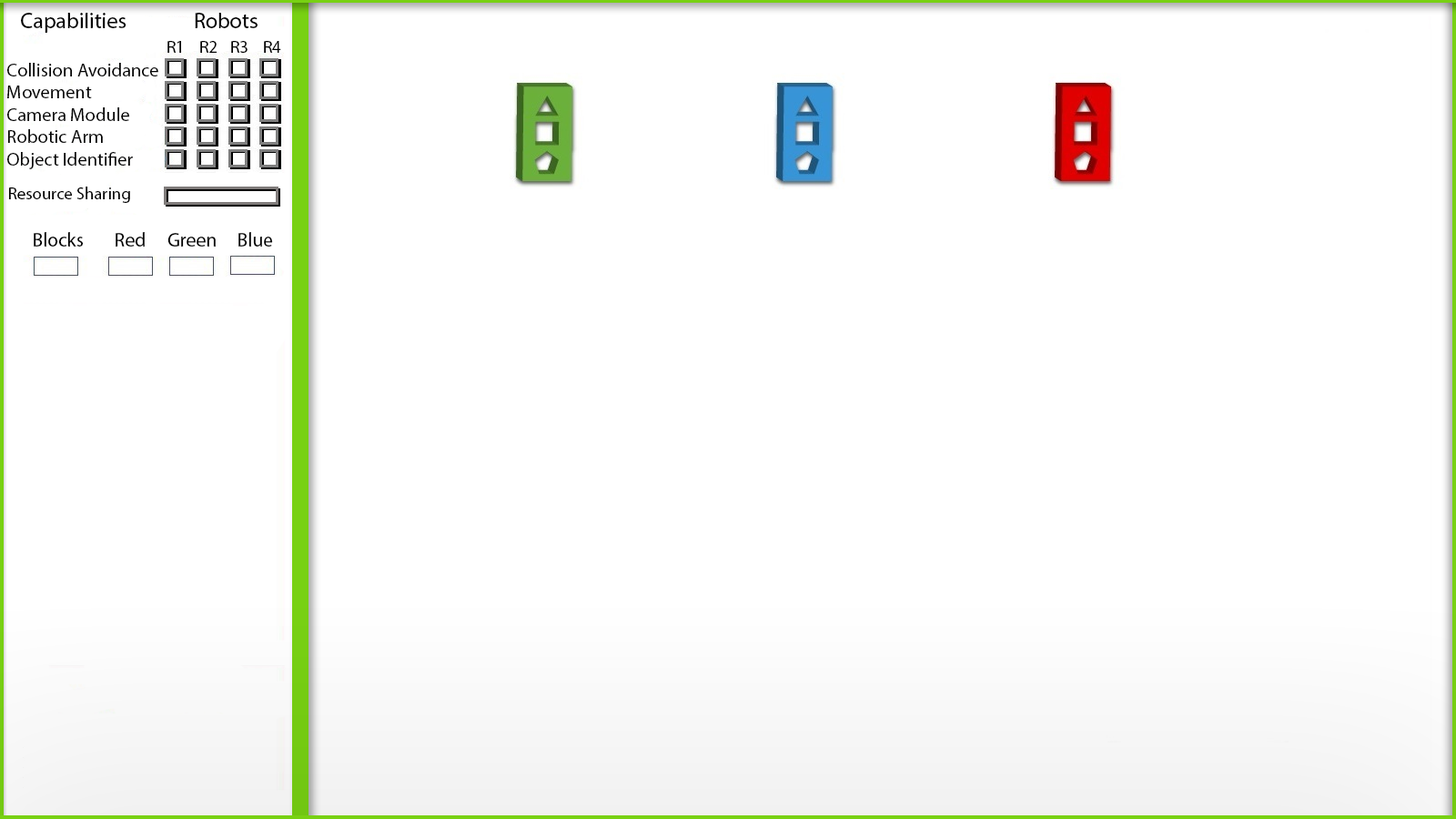
<style>
.page{position:relative;width:1456px;height:819px;background:#ffffff}
.page>*{position:absolute;margin:0}
.t1{font:21.8px "MyriadPro-Regular";color:#000000}
.t2{font:17px "MyriadPro-Regular";color:#000000}
.t3{font:18.6px "MyriadPro-Regular";color:#000000}
.t4{font:19.4px "MyriadPro-Regular";color:#000000}
</style>
<div class="page">
<p class="t1" style="left:21px;top:13px;width:237px;height:20px">Capabilities    Robots</p>
<p class="t2" style="left:167px;top:41px;width:14px;height:12px">R1</p>
<p class="t2" style="left:200px;top:41px;width:17px;height:12px">R2</p>
<p class="t2" style="left:231px;top:41px;width:17px;height:12px">R3</p>
<p class="t2" style="left:264px;top:41px;width:17px;height:12px">R4</p>
<p class="t3" style="left:7px;top:63px;width:151px;height:106px">Collision Avoidance<br>Movement<br>Camera Module<br>Robotic Arm<br>Object Identifier</p>
<p class="t2" style="left:9px;top:187px;width:121px;height:16px">Resource Sharing</p>
<p class="t4" style="left:34px;top:232px;width:239px;height:15px">Blocks     Red  Green     Blue</p>
</div>
